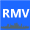
<style>
.page{position:relative;width:30px;height:30px;background:#1d68ff}
.page>*{position:absolute;margin:0}
.t1{font:12px "SegoeUI-Bold";color:#fefeff}
</style>
<div class="page">
<p class="t1" style="left:3px;top:9px;width:27px;height:9px">RMV</p>
</div>
